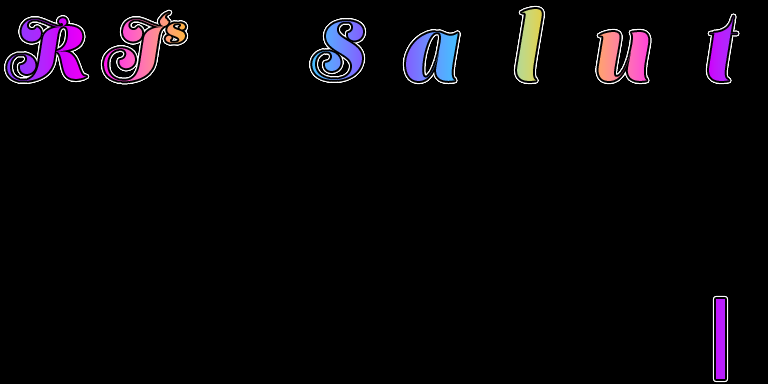
<style>
.page{position:relative;width:768px;height:384px;background:#000000}
.page>*{position:absolute;margin:0}
.t1{font:38px "LustScriptDisplay"}
.t2{font:90px "LustScript-Fine";color:#cdd673}
.t3{font:90px "LustScript-Fine";color:#bd1afd}
.t4{font:70px "LustScriptDisplay"}
.t5{font:90px "LustScript-Fine"}
</style>
<div class="page">
<p class="t1" style="left:160px;top:12px;width:25px;height:31px">‘s</p>
<p class="t2" style="left:517px;top:9px;width:25px;height:72px">l</p>
<p class="t3" style="left:709px;top:16px;width:28px;height:65px">t</p>
<p class="t4" style="left:7px;top:18px;width:80px;height:63px">R</p>
<p class="t4" style="left:104px;top:18px;width:64px;height:64px">J</p>
<p class="t4" style="left:312px;top:21px;width:51px;height:59px">S</p>
<p class="t5" style="left:406px;top:32px;width:52px;height:49px">a</p>
<p class="t5" style="left:598px;top:32px;width:51px;height:49px">u</p>
</div>
